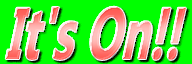
<style>
.page{position:relative;width:192px;height:64px;background:#00ff00}
.page>*{position:absolute;margin:0}
.t1{font:74.6px "Ebrima-Bold";scale:0.62 1}
</style>
<div class="page">
<p class="t1" style="left:5px;top:6px;width:181px;height:54px">It's On!!</p>
</div>
